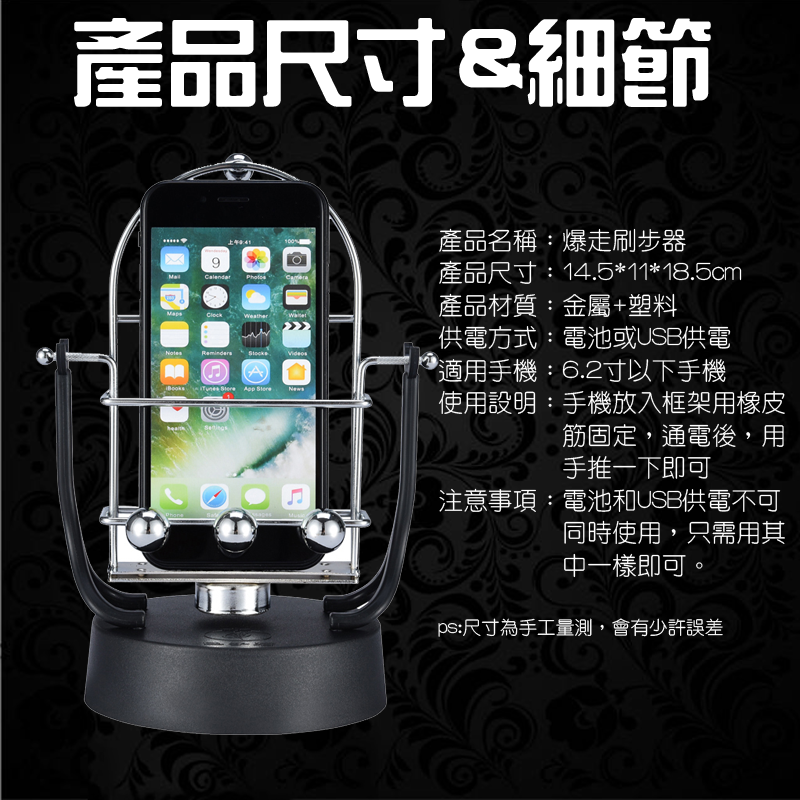
<style>
.page{position:relative;width:800px;height:800px}
.page>*{position:absolute;margin:0}
.t1{font:94.3px "HanWangZonYi";color:#ffffff}
.t2{font:24.8px "HanWangYenLight";color:#ffffff}
.t3{font:18.6px "HanWangYenLight";color:#ffffff}
</style>
<div class="page">
<p class="t1" style="left:74px;top:18px;width:637px;height:89px">產品尺寸&amp;細節</p>
<p class="t2" style="left:438px;top:228px;width:347px;height:409px">產品名稱：爆走刷步器<br>產品尺寸：14.5*11*18.5cm<br>產品材質：金屬+塑料<br>供電方式：電池或USB供電<br>適用手機：6.2寸以下手機<br>使用設明：手機放入框架用橡皮<br>          筋固定，通電後，用<br>          手推一下即可<br>注意事項：電池和USB供電不可<br>          同時使用，只需用其<br>          中一樣即可。<br><br><span class="t3">ps:尺寸為手工量測，會有少許誤差</span></p>
</div>
